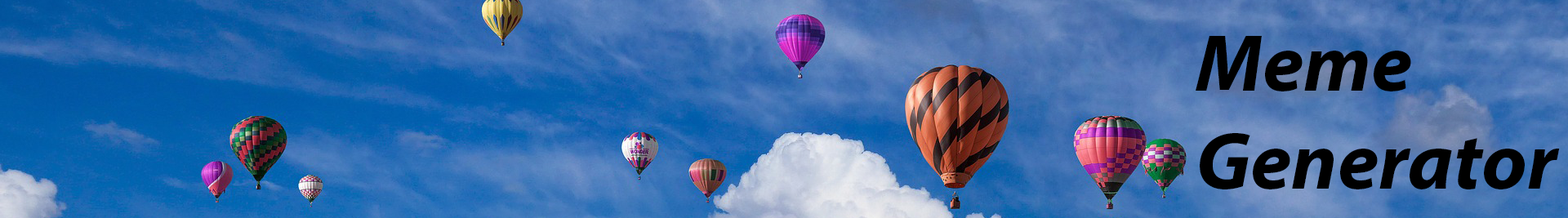
<style>
.page{position:relative;width:1568px;height:218px}
.page>*{position:absolute;margin:0}
.t1{font:81.7px "MyriadPro-BoldIt";color:#000000}
</style>
<div class="page">
<p class="t1" style="left:1196px;top:36px;width:364px;height:153px">Meme<br>Generator</p>
</div>
